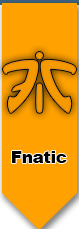
<style>
.page{position:relative;width:79px;height:229px;background:#ffa100}
.page>*{position:absolute;margin:0}
.t1{font:16.7px "Arial-Black";letter-spacing:-0.01em;color:#000000}
</style>
<div class="page">
<p class="t1" style="left:12px;top:151px;width:55px;height:12px">Fnatic</p>
</div>
